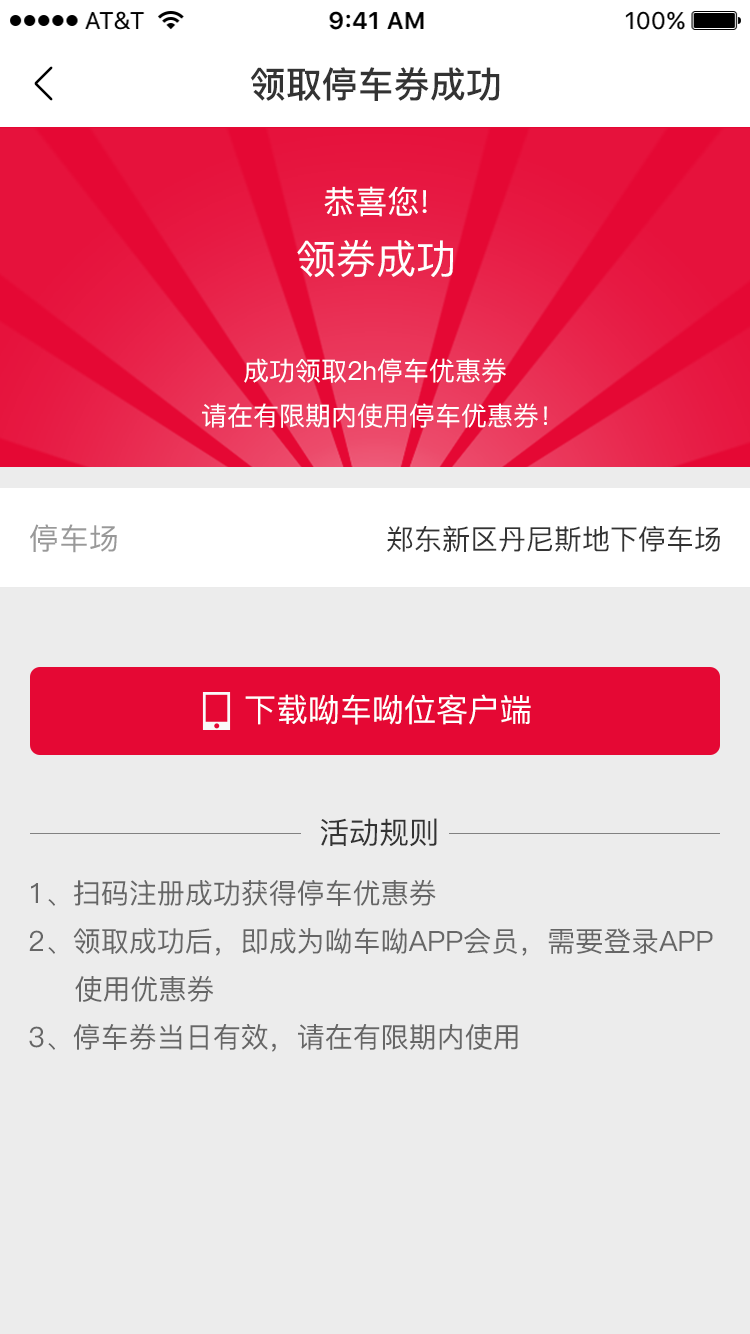
<style>
.page{position:relative;width:750px;height:1334px;background:#ececec}
.page>*{position:absolute;margin:0}
.t1{font:36px "PingFang-SC-Bold";color:#333333}
.t2{font:32px "PingFang-SC-Medium";color:#ffffff}
.t3{font:40px "PingFang-SC-Medium";color:#ffffff}
.t4{font:26px "PingFang-SC-Medium";color:#ffffff}
.t5{font:30px "PingFang-SC-Medium";color:#999999}
.t6{font:28px "PingFang-SC-Medium";color:#333333}
.t7{font:30px "PingFang-SC-Medium";color:#333333}
.t8{font:28px/40px "PingFang-SC-Medium";color:#666666}
.t9{font:28px/48px "PingFang-SC-Medium";color:#666666}
</style>
<div class="page">
<p class="t1" style="left:250px;top:67px;width:250px;height:34px">领取停车券成功</p>
<p class="t2" style="left:324px;top:186px;width:103px;height:31px">恭喜您!</p>
<p class="t3" style="left:297px;top:240px;width:156px;height:38px">领券成功</p>
<p class="t4" style="left:244px;top:358px;width:262px;height:25px">成功领取2h停车优惠券</p>
<p class="t4" style="left:202px;top:403px;width:345px;height:25px">请在有限期内使用停车优惠券！</p>
<p class="t5" style="left:30px;top:524px;width:87px;height:29px">停车场</p>
<p class="t6" style="left:387px;top:525px;width:333px;height:27px">郑东新区丹尼斯地下停车场</p>
<p class="t2" style="left:245px;top:694px;width:286px;height:31px">下载呦车呦位客户端</p>
<p class="t7" style="left:320px;top:818px;width:117px;height:29px">活动规则</p>
<p class="t8" style="left:29px;top:879px;width:684px;height:173px"><span class="t9">1、扫码注册成功获得停车优惠券<br></span>2、领取成功后，即成为呦车呦APP会员，<span class="t9">需要登录APP<br>     使用优惠券<br></span>3、停车券当日有效，请在有限期内使用</p>
</div>
